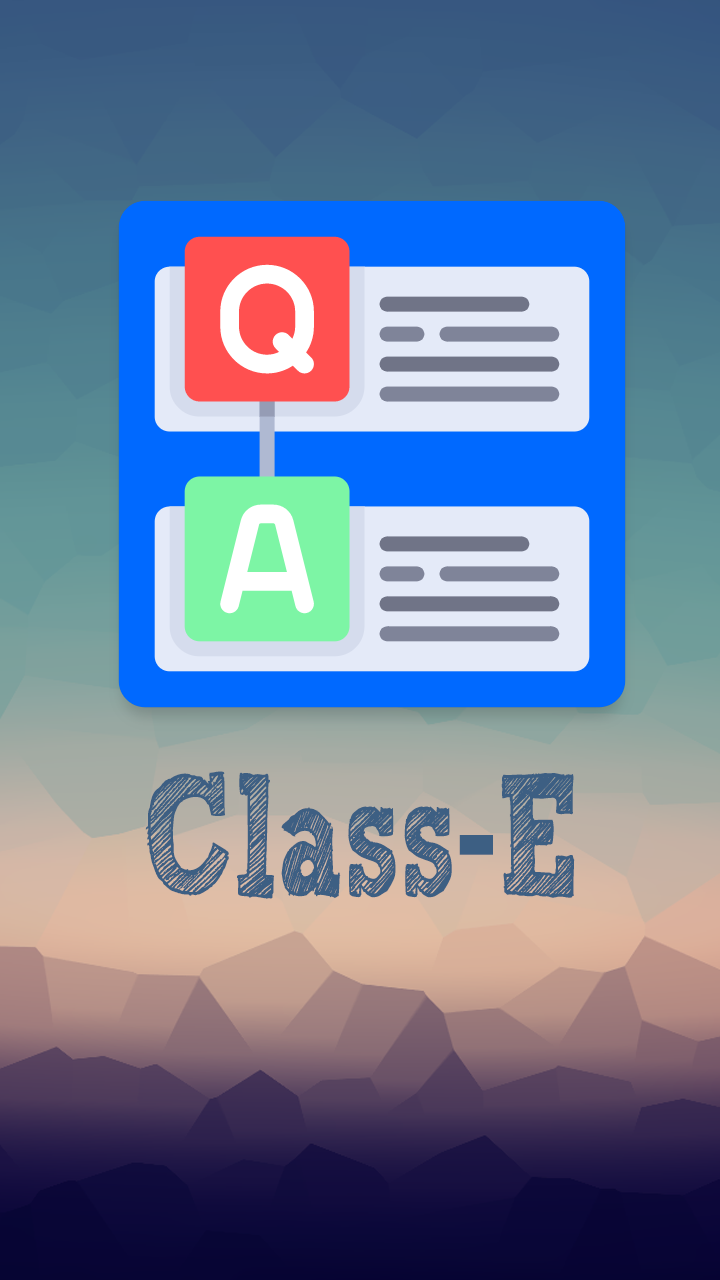
<style>
.page{position:relative;width:720px;height:1280px}
.page>*{position:absolute;margin:0}
.t1{font:174px "freeversionSketchBlock-Bold";color:#3d5f83;scale:0.65 1}
.t2{font:193.3px "MyriadPro-Bold";color:#3d5f83;scale:0.65 1}
</style>
<div class="page">
<p class="t1" style="left:145px;top:771px;width:430px;height:128px">Class<span class="t2">-</span>E</p>
</div>
